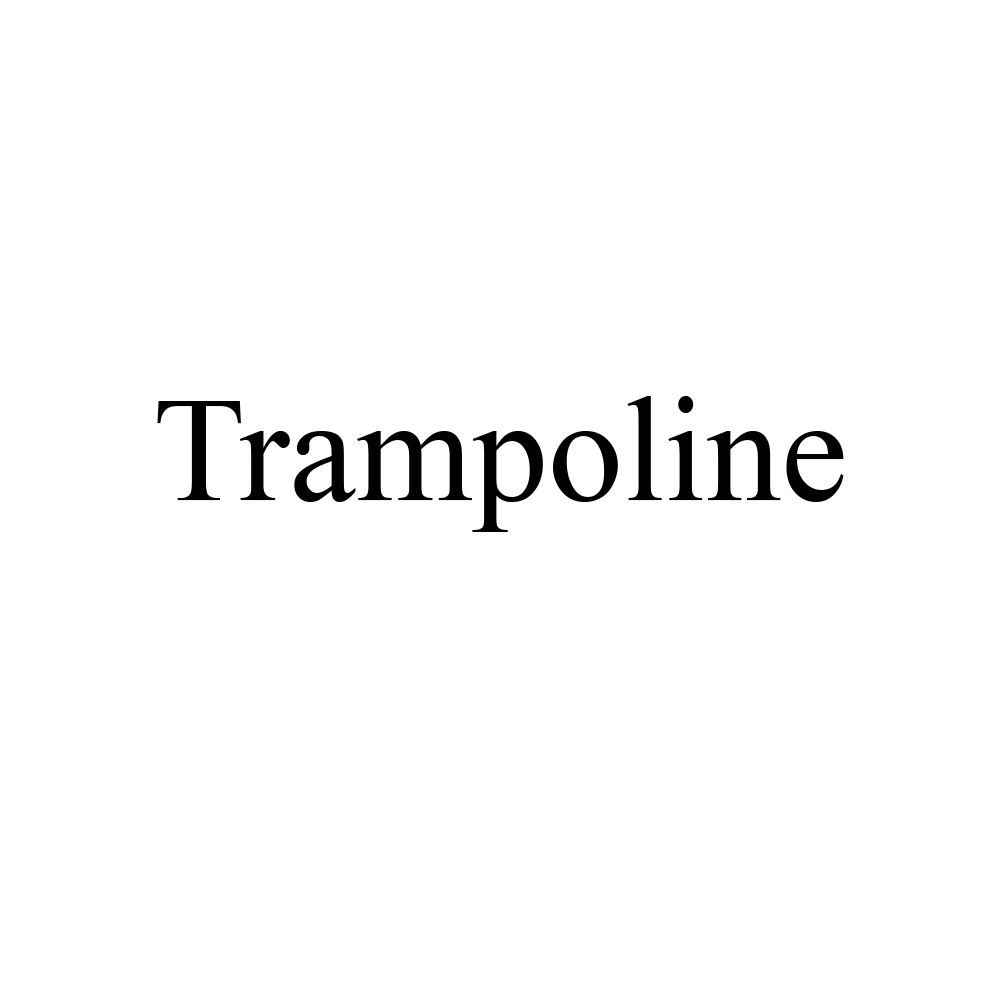
<style>
.page{position:relative;width:1000px;height:1000px;background:#ffffff}
.page>*{position:absolute;margin:0}
.t1{font:150px "TimesNewRomanPSMT";color:#000000}
</style>
<div class="page">
<p class="t1" style="left:157px;top:396px;width:687px;height:136px">Trampoline</p>
</div>
